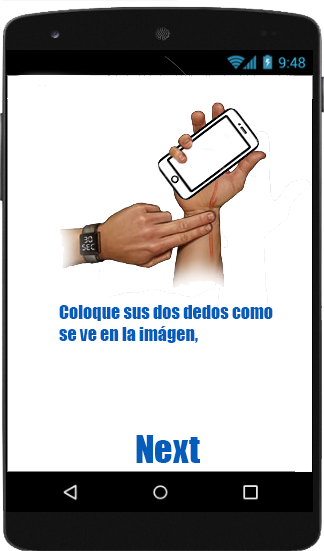
<style>
.page{position:relative;width:324px;height:551px;background:#ffffff}
.page>*{position:absolute;margin:0}
.t1{font:18px "Impact";color:#045dbb}
.t2{font:36px "Impact";color:#045dbb}
</style>
<div class="page">
<p class="t1" style="left:59px;top:305px;width:214px;height:38px">Coloque sus dos dedos como <br>se ve en la imágen,</p>
<p class="t2" style="left:136px;top:435px;width:64px;height:28px">Next</p>
</div>
